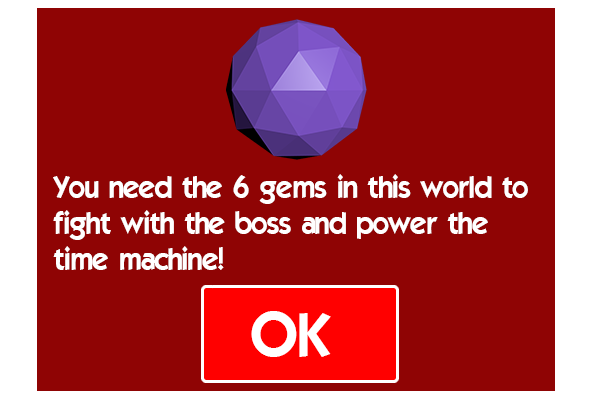
<style>
.page{position:relative;width:600px;height:400px;background:#8f0404}
.page>*{position:absolute;margin:0}
.t1{font:30px "ELEGANCE";color:#ffffff}
</style>
<div class="page">
<p class="t1" style="left:53px;top:174px;width:475px;height:96px">You need the 6 gems in this world to<br>fight with the boss and power the<br>time machine!</p>
</div>
